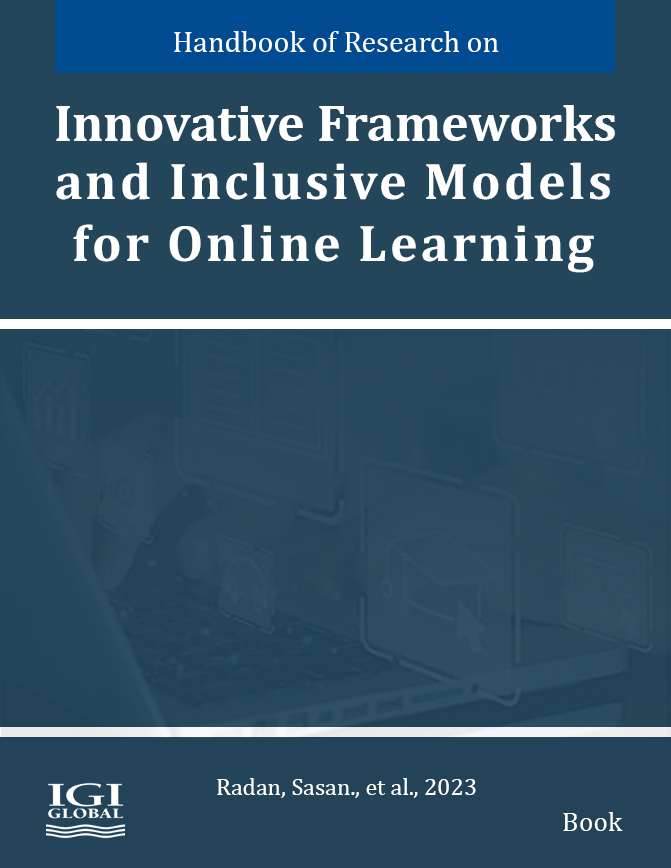
<style>
.page{position:relative;width:671px;height:868px;background:#23465a}
.page>*{position:absolute;margin:0}
.t1{font:30px "Cambria";color:#ffffff}
.t2{font:52px "Cambria-Bold";color:#ffffff}
.t3{font:52px "Cambria-Bold";letter-spacing:0.06em;color:#ffffff}
.t4{font:24px "Cambria";color:#ffffff}
.t5{font:27.4px "Cambria";color:#ffffff}
</style>
<div class="page">
<p class="t1" style="left:174px;top:31px;width:325px;height:21px">Handbook of Research on</p>
<p class="t2" style="left:56px;top:105px;width:559px;height:36px">Innovative Frameworks</p>
<p class="t3" style="left:56px;top:162px;width:554px;height:111px;text-align:justify">and Inclusive Models <br>for Online Learning</p>
<p class="t4" style="left:217px;top:778px;width:259px;height:20px">Radan, Sasan., et al., 2023</p>
<p class="t5" style="left:563px;top:812px;width:60px;height:19px">Book</p>
</div>
